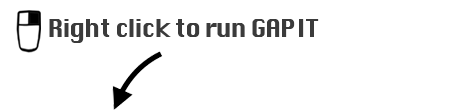
<style>
.page{position:relative;width:461px;height:110px;background:#ffffff}
.page>*{position:absolute;margin:0}
.t1{font:24.3px "Silom";letter-spacing:-0.05em;color:#3b3b3b}
</style>
<div class="page">
<p class="t1" style="left:49px;top:19px;width:270px;height:24px">Right click to run GAPIT</p>
</div>
